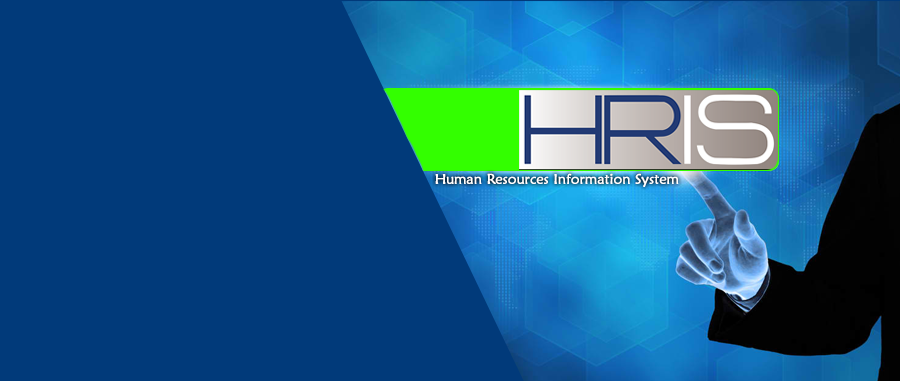
<style>
.page{position:relative;width:900px;height:381px;background:#013a7a}
.page>*{position:absolute;margin:0}
.t1{font:14px "MaiandraGD-Regular";color:#ffffff;font-weight:bold}
</style>
<div class="page">
<p class="t1" style="left:435px;top:173px;width:244px;height:14px">Human Resources Information System</p>
</div>
